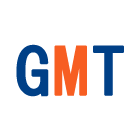
<style>
.page{position:relative;width:140px;height:140px;background:#ffffff}
.page>*{position:absolute;margin:0}
.t1{font:72px "SimHei";color:#004087;font-weight:bold}
.t2{font:72px "SimHei";color:#f75e22;font-weight:bold}
</style>
<div class="page">
<p class="t1" style="left:16px;top:44px;width:108px;height:53px">G<span class="t2">M</span>T</p>
</div>
